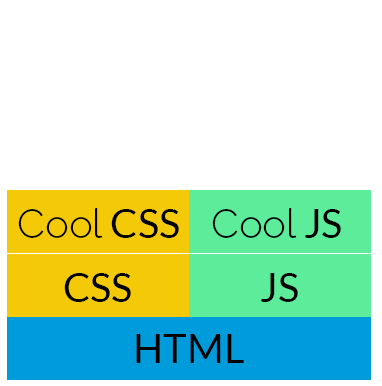
<style>
.page{position:relative;width:382px;height:386px;background:#ffffff}
.page>*{position:absolute;margin:0}
.t1{font:40px "Raleway-Light";color:#000000}
.t2{font:40px "Lato-Regular";color:#000000}
</style>
<div class="page">
<p class="t1" style="left:18px;top:208px;width:161px;height:30px"><span class="t2"><br></span>Cool<span class="t2"> CSS</span></p>
<p class="t1" style="left:212px;top:208px;width:129px;height:30px"><span class="t2"><br></span>Cool<span class="t2"> JS</span></p>
<p class="t2" style="left:64px;top:273px;width:67px;height:29px">CSS</p>
<p class="t2" style="left:261px;top:273px;width:37px;height:29px">JS</p>
<p class="t2" style="left:136px;top:334px;width:108px;height:29px">HTML</p>
</div>
